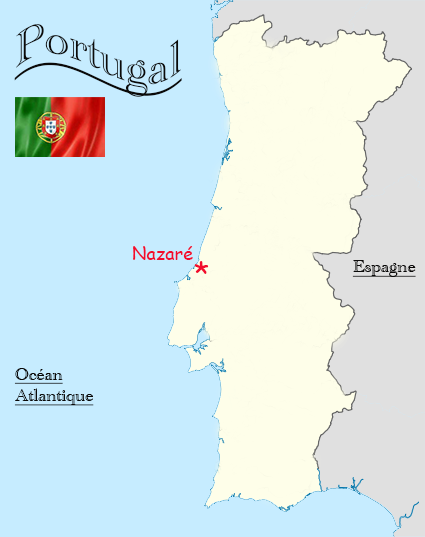
<style>
.page{position:relative;width:425px;height:537px;background:#c6ecff}
.page>*{position:absolute;margin:0}
.t1{font:48px "AcademyEngravedLetPlain";color:#0a0908;text-decoration:underline}
.t2{font:18px "ComicSansMS";color:#f20c2d}
.t3{font:30px "ComicSansMS";color:#f20c2d}
.t4{font:18px "AcademyEngravedLetPlain";color:#0a0908;text-decoration:underline}
</style>
<div class="page">
<p class="t1" style="left:14px;top:24px;width:168px;height:73px">Portugal</p>
<p class="t2" style="left:133px;top:246px;width:60px;height:14px">Nazaré</p>
<p class="t3" style="left:194px;top:261px;width:15px;height:13px">*</p>
<p class="t4" style="left:352px;top:260px;width:64px;height:17px">Espagne</p>
<p class="t4" style="left:14px;top:368px;width:80px;height:38px">Océan<br>Atlantique</p>
</div>
